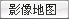
<style>
.page{position:relative;width:69px;height:19px}
.page>*{position:absolute;margin:0}
.t1{font:12px "SimSun";color:#2d2d2d}
</style>
<div class="page">
<p class="t1" style="left:9px;top:4px;width:47px;height:11px">影像地图</p>
</div>
